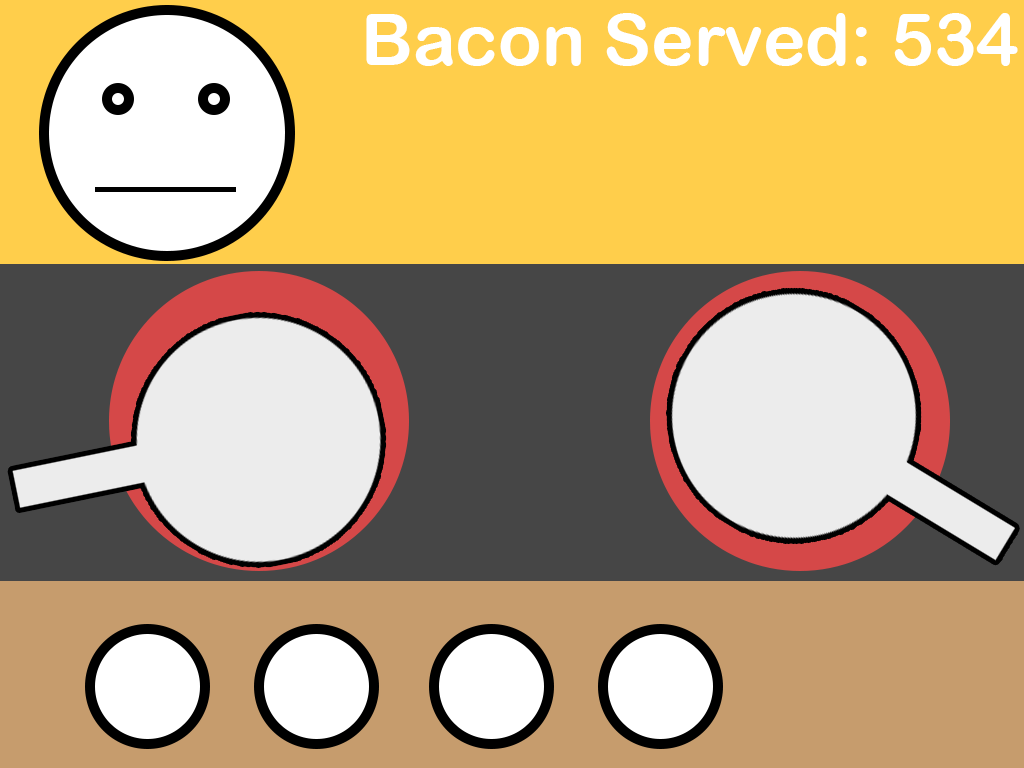
<style>
.page{position:relative;width:1024px;height:768px;background:#ffce4b}
.page>*{position:absolute;margin:0}
.t1{font:72px "ArialRoundedMTBold";color:#ffffff}
</style>
<div class="page">
<p class="t1" style="left:366px;top:13px;width:652px;height:53px">Bacon Served: 534</p>
</div>
